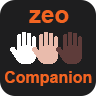
<style>
.page{position:relative;width:96px;height:96px;background:#1e1e1f}
.page>*{position:absolute;margin:0}
.t1{font:24px "Arial-BoldMT";color:#f26522}
.t2{font:16px "Arial-BoldMT";color:#f26522}
</style>
<div class="page">
<p class="t1" style="left:29px;top:10px;width:40px;height:13px">zeo</p>
<p class="t2" style="left:5px;top:71px;width:87px;height:15px">Companion</p>
</div>
